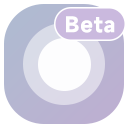
<style>
.page{position:relative;width:128px;height:128px;background:#ffffff}
.page>*{position:absolute;margin:0}
.t1{font:20px "MiSans-Bold";letter-spacing:0.04em;color:#ffffff}
</style>
<div class="page">
<p class="t1" style="left:66px;top:16px;width:49px;height:17px">Beta</p>
</div>
